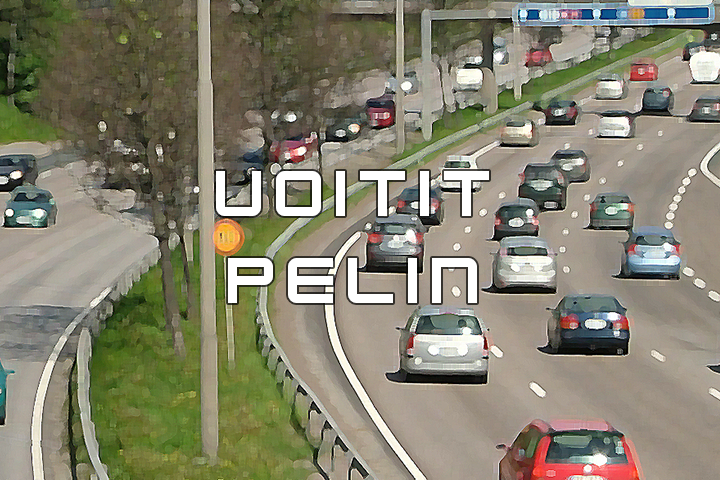
<style>
.page{position:relative;width:720px;height:480px}
.page>*{position:absolute;margin:0}
.t1{font:72px "KenVector-Future";color:#ffffff}
</style>
<div class="page">
<p class="t1" style="left:216px;top:171px;width:273px;height:132px;text-align:center">VOITIT PELIN</p>
</div>
